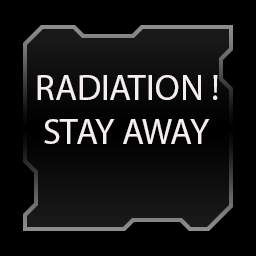
<style>
.page{position:relative;width:256px;height:256px;background:#000000}
.page>*{position:absolute;margin:0}
.t1{font:36px "MyriadPro-Regular";color:#f4eeee}
.t2{font:30px "MyriadPro-Regular";color:#f4eeee}
</style>
<div class="page">
<p class="t1" style="left:37px;top:75px;width:181px;height:69px"><span class="t2"><br></span>RADIATION !<br> STAY AWAY</p>
</div>
